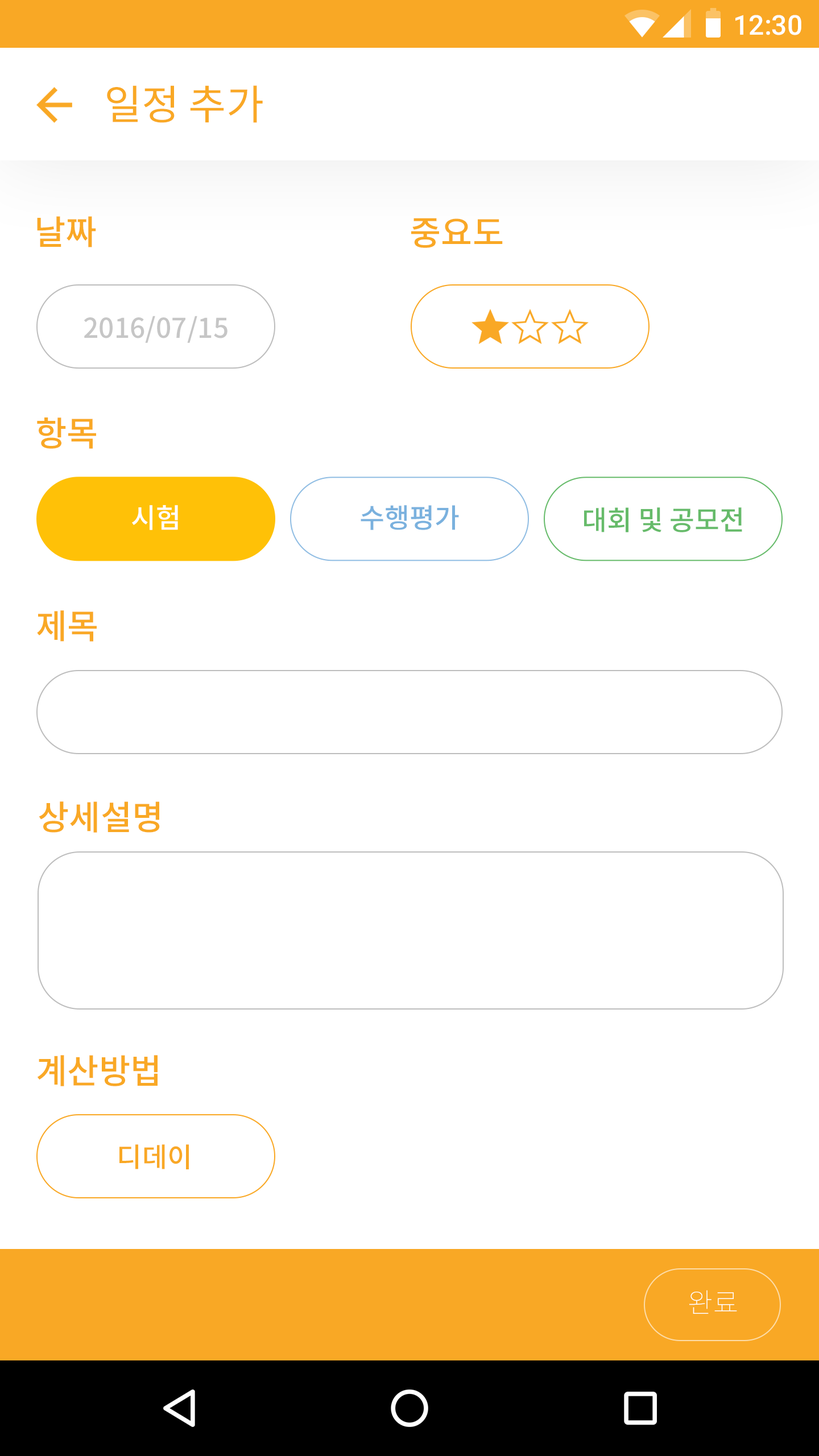
<style>
.page{position:relative;width:819px;height:1456px;background:#ffffff}
.page>*{position:absolute;margin:0}
.t1{font:27.3px "Roboto-Medium";color:#ffffff}
.t2{font:40.9px "NotoSansCJKkr-Regular";color:#f9a825}
.t3{font:34.1px "NotoSansCJKkr-Medium";color:#f9a825}
.t4{font:27.3px "NotoSansCJKkr-Medium";color:#c6c6c6}
.t5{font:27.3px "NotoSansCJKkr-Medium";color:#ffffff}
.t6{font:27.3px "NotoSansCJKkr-Medium";color:#7ab1de}
.t7{font:27.3px "NotoSansCJKkr-Medium";color:#66bb6a}
.t8{font:27.3px "NotoSansCJKkr-Medium";color:#f9a825}
.t9{font:27.3px "NotoSansCJKkr-Thin";letter-spacing:0.025em;color:#ffffff}
</style>
<div class="page">
<p class="t1" style="left:735px;top:15px;width:66px;height:20px">12:30</p>
<p class="t2" style="left:107px;top:85px;width:156px;height:38px">일정 추가</p>
<p class="t3" style="left:37px;top:216px;width:59px;height:31px">날짜</p>
<p class="t3" style="left:411px;top:218px;width:92px;height:30px">중요도</p>
<p class="t4" style="left:84px;top:316px;width:143px;height:27px">2016/07/15</p>
<p class="t3" style="left:37px;top:417px;width:59px;height:32px">항목</p>
<p class="t5" style="left:132px;top:505px;width:46px;height:25px">시험</p>
<p class="t6" style="left:361px;top:505px;width:98px;height:25px">수행평가</p>
<p class="t7" style="left:584px;top:507px;width:158px;height:25px">대회 및 공모전</p>
<p class="t3" style="left:37px;top:610px;width:60px;height:32px">제목</p>
<p class="t3" style="left:39px;top:801px;width:121px;height:32px">상세설명</p>
<p class="t3" style="left:37px;top:1055px;width:121px;height:31px">계산방법</p>
<p class="t8" style="left:119px;top:1144px;width:70px;height:25px">디데이</p>
<p class="t9" style="left:689px;top:1290px;width:48px;height:24px">완료</p>
</div>
